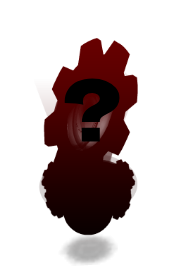
<style>
.page{position:relative;width:172px;height:267px;background:#ffffff}
.page>*{position:absolute;margin:0}
.t1{font:77.8px "DelaGothicOne-Regular";color:#000000}
</style>
<div class="page">
<p class="t1" style="left:64px;top:78px;width:56px;height:64px">?</p>
</div>
